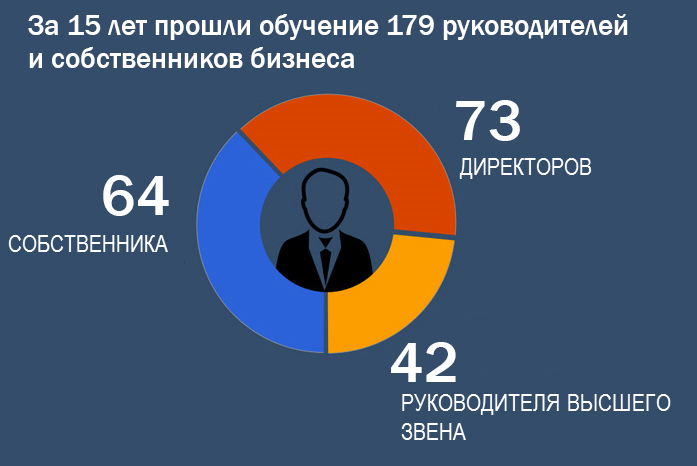
<style>
.page{position:relative;width:697px;height:466px;background:#344d6b}
.page>*{position:absolute;margin:0}
.t1{font:29px/33px "FranklinGothic-Medium";color:#ffffff}
.t2{font:59px "FranklinGothic-Medium";color:#ffffff}
</style>
<div class="page">
<p class="t1" style="left:28px;top:14px;width:600px;height:54px;text-align:right">За 15 лет прошли обучение 179 руководителей <br>и собственников бизнеса</p>
<p class="t2" style="left:456px;top:100px;width:64px;height:41px">73</p>
<p class="t2" style="left:103px;top:175px;width:66px;height:41px">64</p>
<p class="t2" style="left:391px;top:342px;width:65px;height:40px">42</p>
</div>
